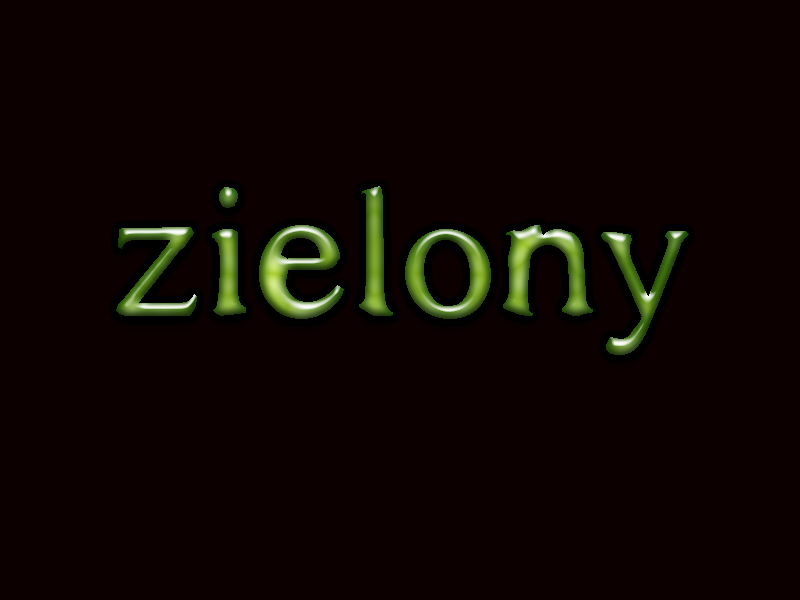
<style>
.page{position:relative;width:800px;height:600px;background:#0d0000}
.page>*{position:absolute;margin:0}
.t1{font:200px "ShadowsAroundUs"}
</style>
<div class="page">
<p class="t1" style="left:116px;top:186px;width:573px;height:169px">zielony</p>
</div>
